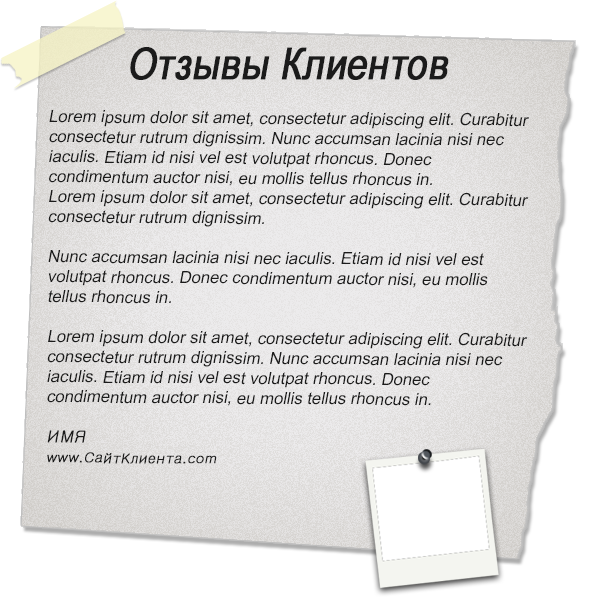
<style>
.page{position:relative;width:600px;height:600px;background:#ffffff}
.page>*{position:absolute;margin:0}
.t1{font:44px "ArialNarrow";color:#1b1b1b;font-weight:bold;font-style:italic}
.t2{font:16.7px/20px "ArialMT";color:#1b1b1b;font-style:italic}
.t3{font:16.7px/20px "Gulim";color:#1b1b1b;font-weight:bold;font-style:italic}
.t4{font:13.9px/20px "Gulim";color:#1b1b1b;font-weight:bold;font-style:italic}
</style>
<div class="page">
<p class="t1" style="left:130px;top:47px;width:319px;height:33px">Отзывы Клиентов</p>
<p class="t2" style="left:47px;top:110px;width:482px;height:354px">Lorem ipsum dolor sit amet, consectetur adipiscing elit. Curabitur consectetur rutrum dignissim. Nunc accumsan lacinia nisi nec iaculis. Etiam id nisi vel est volutpat rhoncus. Donec condimentum auctor nisi, eu mollis tellus rhoncus in.  <br>Lorem ipsum dolor sit amet, consectetur adipiscing elit. Curabitur consectetur rutrum dignissim. <br><br>Nunc accumsan lacinia nisi nec iaculis. Etiam id nisi vel est volutpat rhoncus. Donec condimentum auctor nisi, eu mollis tellus rhoncus in.  <br><br>Lorem ipsum dolor sit amet, consectetur adipiscing elit. Curabitur consectetur rutrum dignissim. Nunc accumsan lacinia nisi nec iaculis. Etiam id nisi vel est volutpat rhoncus. Donec condimentum auctor nisi, eu mollis tellus rhoncus in.  <br><br><span class="t3">ИМЯ<br></span><span class="t4">www.СайтКлиента.com</span></p>
</div>
